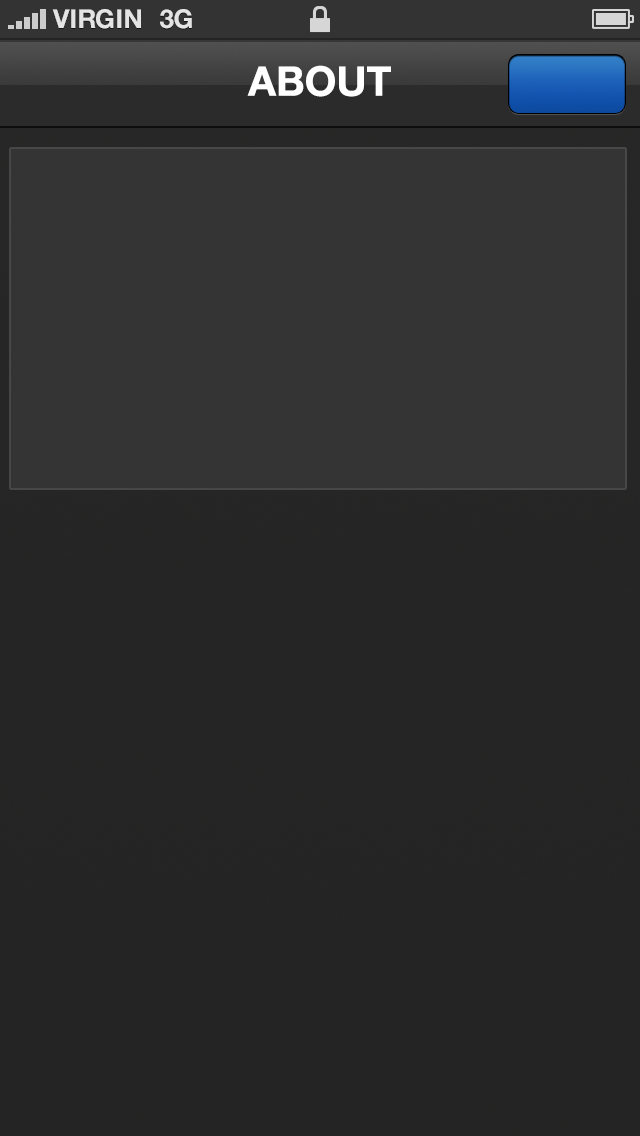
<style>
.page{position:relative;width:640px;height:1136px;background:#343434}
.page>*{position:absolute;margin:0}
.t1{font:26px "HelveticaNeue-Bold";color:#e4e4e4;text-transform:uppercase}
.t2{font:40.8px "HelveticaNeue-Bold";color:#fcfcfc}
</style>
<div class="page">
<p class="t1" style="left:52px;top:9px;width:89px;height:20px">VIRGIN</p>
<p class="t1" style="left:160px;top:9px;width:32px;height:20px">3G</p>
<p class="t2" style="left:247px;top:65px;width:144px;height:32px">ABOUT</p>
</div>
